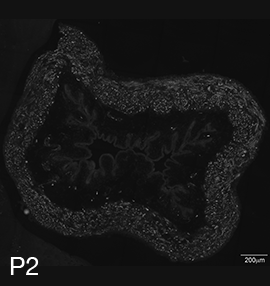
<style>
.page{position:relative;width:270px;height:286px}
.page>*{position:absolute;margin:0}
.t1{font:25.4px "HelveticaNeue";color:#ffffff}
</style>
<div class="page">
<p class="t1" style="left:10px;top:257px;width:29px;height:18px">P2</p>
</div>
